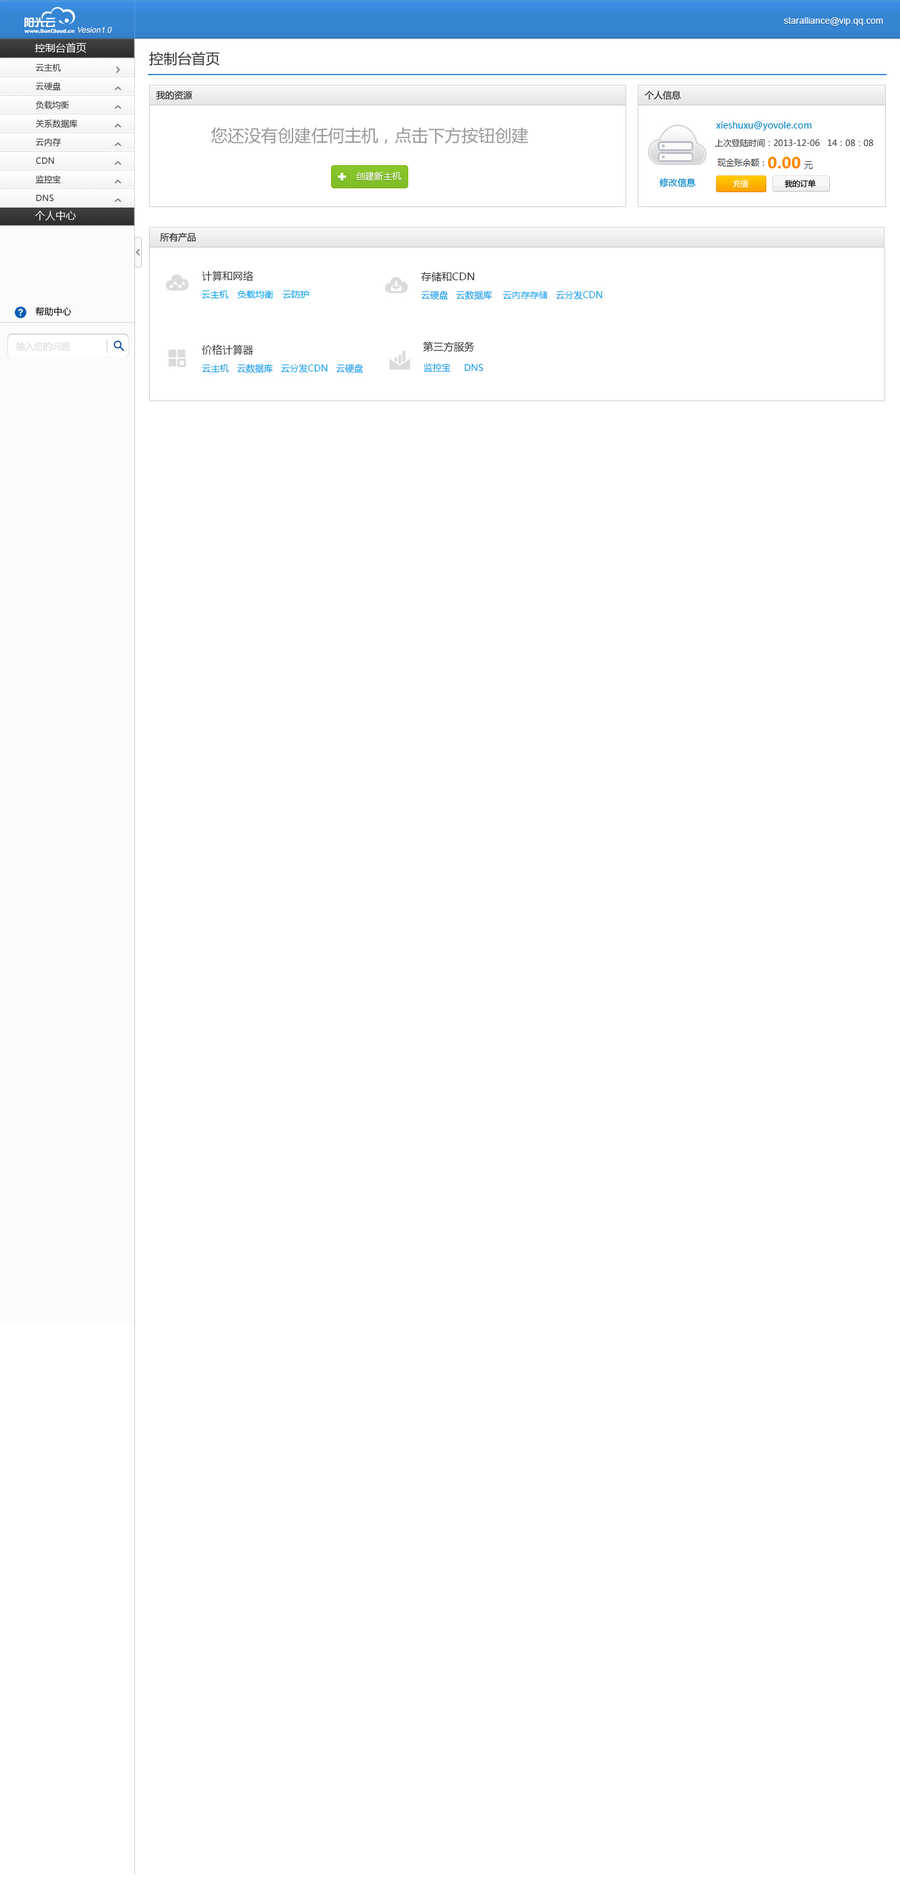
<style>
.page{position:relative;width:900px;height:1891px;background:#ffffff}
.page>*{position:absolute;margin:0}
.t1{font:9px "ArialMT";color:#ffffff}
.t2{font:7.7px "ArialMT";color:#ffffff;font-style:italic}
.t3{font:10.3px "MicrosoftYaHei";color:#ffffff}
.t4{font:14.1px "MicrosoftYaHei";color:#333333}
.t5{font:8.4px "MicrosoftYaHei";color:#333333}
.t6{font:9px "MicrosoftYaHei";color:#333333}
.t7{font:9px "MicrosoftYaHei";color:#0082c8}
.t8{font:16.7px "MicrosoftYaHei";color:#999999}
.t9{font:9px "MicrosoftYaHei";color:#ffffff}
.t10{font:7.7px "MicrosoftYaHei";color:#000000}
.t11{font:7.7px "MicrosoftYaHei";color:#ffffff}
.t12{font:9px "MicrosoftYaHei";color:#000000}
.t13{font:9px "MicrosoftYaHei";color:#d7d7d7}
.t14{font:10.3px "MicrosoftYaHei";color:#333333}
.t15{font:9px "MicrosoftYaHei";color:#1596e7}
</style>
<div class="page">
<p class="t1" style="left:784px;top:17px;width:99px;height:9px">staralliance@vip.qq.com</p>
<p class="t2" style="left:78px;top:27px;width:34px;height:6px">Vesion1.0</p>
<p class="t3" style="left:35px;top:42px;width:51px;height:11px">控制台首页</p>
<p class="t4" style="left:149px;top:51px;width:71px;height:15px">控制台首页</p>
<p class="t5" style="left:35px;top:64px;width:26px;height:8px">云主机</p>
<p class="t5" style="left:35px;top:82px;width:26px;height:9px">云硬盘</p>
<p class="t5" style="left:35px;top:101px;width:34px;height:8px">负载均衡</p>
<p class="t6" style="left:156px;top:91px;width:36px;height:9px">我的资源</p>
<p class="t6" style="left:645px;top:91px;width:36px;height:9px">个人信息</p>
<p class="t5" style="left:35px;top:119px;width:43px;height:9px">关系数据库</p>
<p class="t7" style="left:716px;top:122px;width:96px;height:8px">xieshuxu@yovole.com</p>
<p class="t5" style="left:35px;top:138px;width:26px;height:9px">云内存</p>
<p class="t8" style="left:211px;top:127px;width:317px;height:17px">您还没有创建任何主机，点击下方按钮创建</p>
<p class="t5" style="left:715px;top:139px;width:158px;height:8px">上次登陆时间：2013-12-06   14：08：08</p>
<p class="t5" style="left:36px;top:157px;width:18px;height:7px">CDN</p>
<p class="t9" style="left:356px;top:172px;width:45px;height:9px">创建新主机</p>
<p class="t5" style="left:35px;top:175px;width:26px;height:9px">监控宝</p>
<p class="t7" style="left:660px;top:178px;width:36px;height:10px">修改信息</p>
<p class="t10" style="left:733px;top:179px;width:83px;height:9px"><span class="t11">充值  </span>              我的订单</p>
<p class="t5" style="left:36px;top:194px;width:18px;height:7px">DNS</p>
<p class="t3" style="left:35px;top:211px;width:41px;height:10px">个人中心</p>
<p class="t6" style="left:160px;top:233px;width:36px;height:9px">所有产品</p>
<p class="t12" style="left:35px;top:307px;width:36px;height:9px">帮助中心</p>
<p class="t13" style="left:16px;top:342px;width:54px;height:9px">输入您的问题</p>
<p class="t14" style="left:423px;top:341px;width:51px;height:11px">第三方服务</p>
<p class="t15" style="left:424px;top:363px;width:59px;height:9px">监控宝     DNS</p>
</div>
